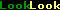
<style>
.page{position:relative;width:60px;height:10px;background:#000000}
.page>*{position:absolute;margin:0}
.t1{font:13.2px "Onesize";color:#009900;scale:0.91 1}
.t2{font:13.2px "Onesize";color:#ffff66;scale:0.91 1}
</style>
<div class="page">
<p class="t1" style="left:0px;top:1px;width:30px;height:8px">Look</p>
<p class="t2" style="left:30px;top:1px;width:30px;height:8px">Look</p>
</div>
